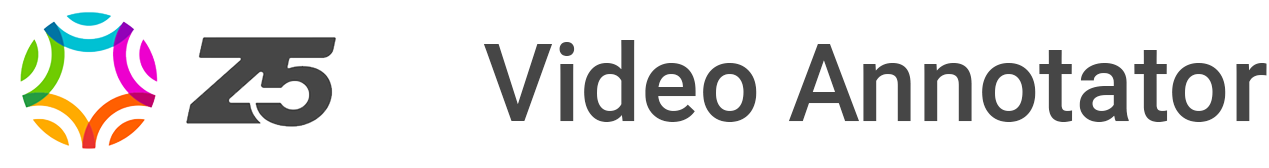
<style>
.page{position:relative;width:1269px;height:168px;background:#ffffff}
.page>*{position:absolute;margin:0}
.t1{font:108.2px "Roboto-Medium";color:#464646}
</style>
<div class="page">
<p class="t1" style="left:483px;top:40px;width:784px;height:82px">Video Annotator</p>
</div>
